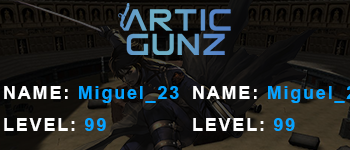
<style>
.page{position:relative;width:350px;height:150px}
.page>*{position:absolute;margin:0}
.t1{font:18px "Arial-BoldMT";letter-spacing:0.1em;color:#03a3ff}
.t2{font:18px "Arial-BoldMT";letter-spacing:0.1em;color:#fefefe}
</style>
<div class="page">
<p class="t1" style="left:4px;top:86px;width:175px;height:17px"><span class="t2">NAME: </span>Miguel_23</p>
<p class="t2" style="left:4px;top:118px;width:102px;height:13px">LEVEL: <span class="t1">99</span></p>
<p class="t2" style="left:193px;top:118px;width:102px;height:13px">LEVEL: <span class="t1">99</span></p>
</div>
